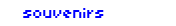
<style>
.page{position:relative;width:176px;height:26px;background:#ffffff}
.page>*{position:absolute;margin:0}
.t1{font:16px "04b03";color:#0000ff}
</style>
<div class="page">
<p class="t1" style="left:23px;top:6px;width:82px;height:16px">souvenirs</p>
</div>
